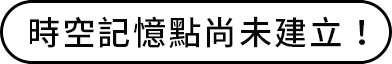
<style>
.page{position:relative;width:392px;height:64px;background:#ffffff}
.page>*{position:absolute;margin:0}
.t1{font:33.3px "NotoSansCJKtc-Medium";letter-spacing:0.06em;color:#060606}
</style>
<div class="page">
<p class="t1" style="left:29px;top:16px;width:336px;height:33px">時空記憶點尚未建立！</p>
</div>
